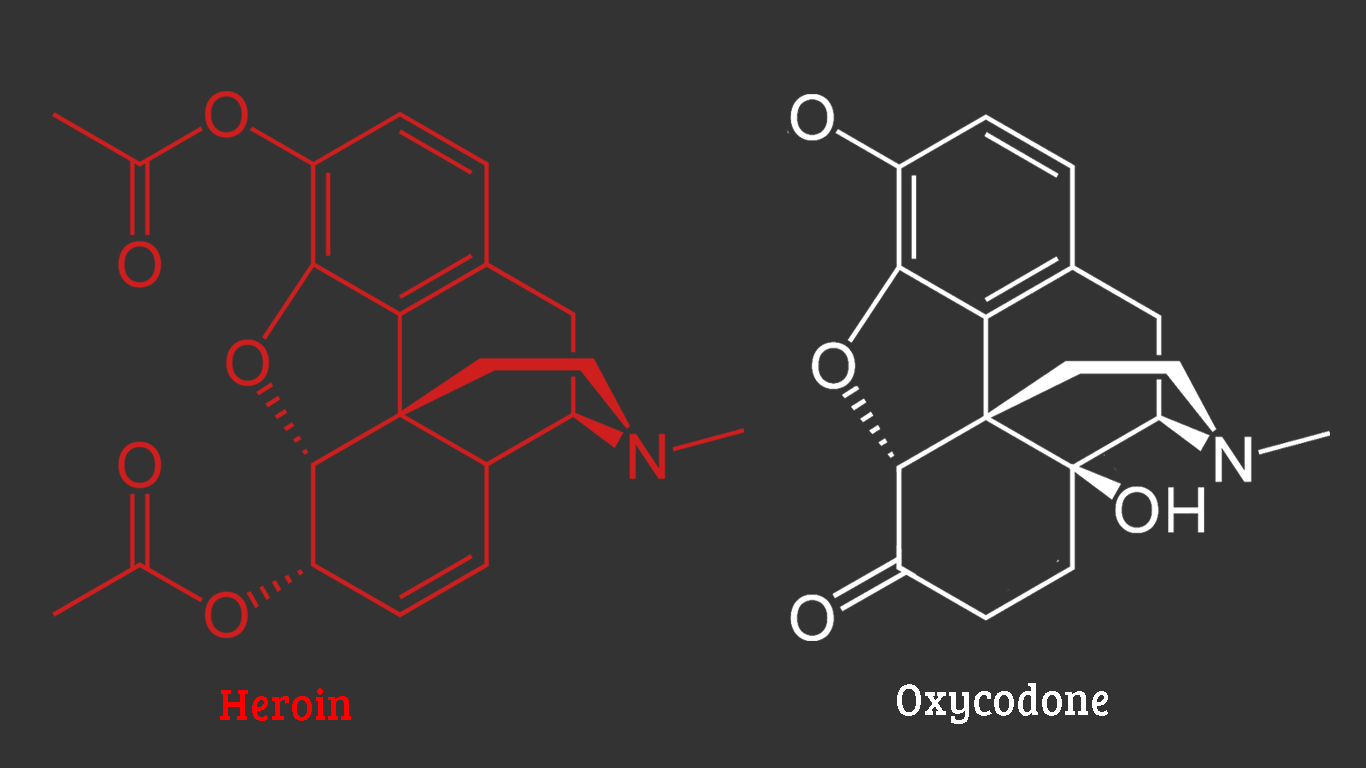
<style>
.page{position:relative;width:1366px;height:768px;background:#333333}
.page>*{position:absolute;margin:0}
.t1{font:45px "BreeSerif-Regular";letter-spacing:0.025em;color:#ff0000;scale:0.93 1}
.t2{font:45px "BreeSerif-Regular";letter-spacing:0.025em;color:#ffffff;scale:0.93 1}
</style>
<div class="page">
<p class="t1" style="left:220px;top:688px;width:131px;height:33px">Heroin</p>
<p class="t2" style="left:897px;top:683px;width:211px;height:41px">Oxycodone</p>
</div>
